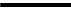
<style>
.page{position:relative;width:71px;height:10px;background:#ffffff}
.page>*{position:absolute;margin:0}
.t1{font:89.4px "MicrosoftSansSerif";color:#000000;scale:1.41 1}
</style>
<div class="page">
<p class="t1" style="left:0px;top:3px;width:72px;height:4px">_</p>
</div>
